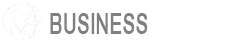
<style>
.page{position:relative;width:250px;height:45px;background:#ffffff}
.page>*{position:absolute;margin:0}
.t1{font:29.2px "Catriel-Bold";color:#7f7f7f;scale:0.67 1}
</style>
<div class="page">
<p class="t1" style="left:50px;top:13px;width:98px;height:21px">BUSINESS</p>
</div>
